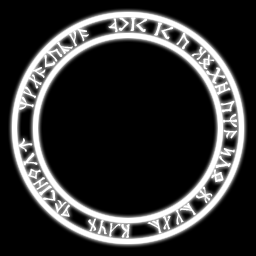
<style>
.page{position:relative;width:256px;height:256px;background:#000000}
.page>*{position:absolute;margin:0}
.t1{font:17.5px/12.5px "Angerthas";color:#ffffff}
</style>
<div class="page">
<p class="t1" style="left:18px;top:17px;width:220px;height:221px">This is a RUNE and you D jklj  JSKL  fdsiewor   nkldsajkd</p>
</div>
